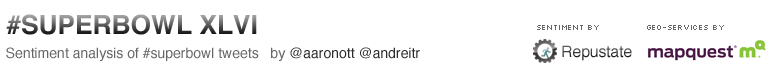
<style>
.page{position:relative;width:780px;height:70px;background:#ffffff}
.page>*{position:absolute;margin:0}
.t1{font:26.3px "Helvetica-Bold"}
.t2{font:8px "Silkscreen";color:#666666}
.t3{font:14px "Helvetica";color:#666666}
.t4{font:14px "Helvetica";color:#2b2b2b}
.t5{font:15.6px "Helvetica"}
</style>
<div class="page">
<p class="t1" style="left:6px;top:14px;width:251px;height:21px">#SUPERBOWL XLVI</p>
<p class="t2" style="left:537px;top:25px;width:62px;height:5px">SENTIMENT BY</p>
<p class="t2" style="left:647px;top:25px;width:77px;height:5px">GEO-SERVICES BY</p>
<p class="t3" style="left:6px;top:47px;width:414px;height:14px">Sentiment analysis of #superbowl tweets   by <span class="t4">@aaronott @andreitr</span></p>
<p class="t5" style="left:562px;top:45px;width:70px;height:16px">Repustate</p>
</div>
